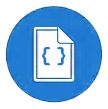
<style>
.page{position:relative;width:108px;height:109px;background:#ffffff}
.page>*{position:absolute;margin:0}
.t1{font:21.8px "BMJUA";letter-spacing:0.2em;color:#1f78d2;scale:1.06 1}
</style>
<div class="page">
<p class="t1" style="left:42px;top:47px;width:24px;height:19px">{}</p>
</div>
